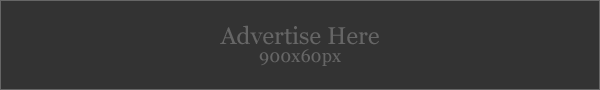
<style>
.page{position:relative;width:600px;height:90px;background:#333333}
.page>*{position:absolute;margin:0}
.t1{font:24px "Georgia";color:#666666}
.t2{font:18px "Georgia";color:#666666}
</style>
<div class="page">
<p class="t1" style="left:220px;top:25px;width:159px;height:20px">Advertise Here</p>
<p class="t2" style="left:259px;top:49px;width:82px;height:17px">900x60px</p>
</div>
